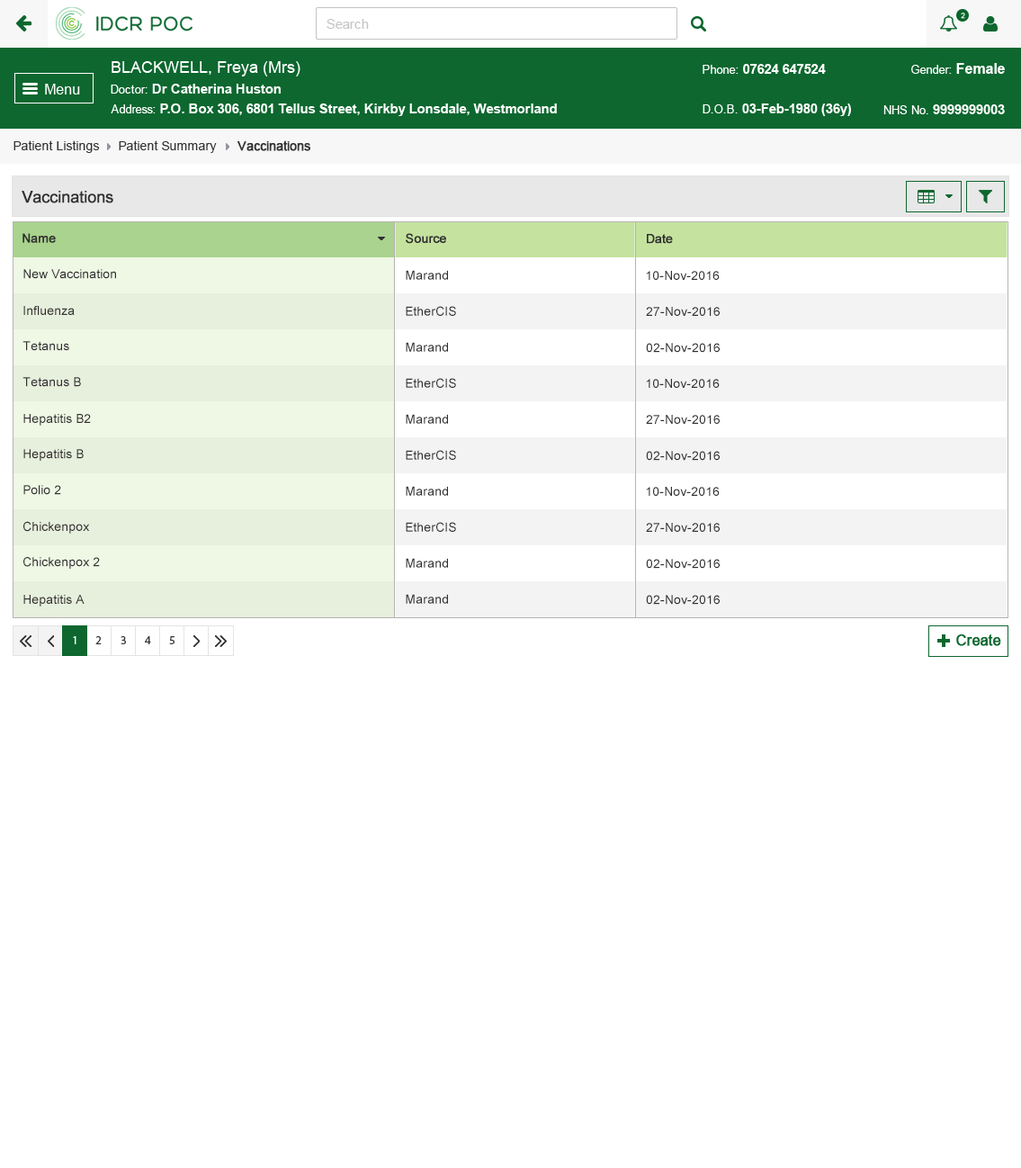
<style>
.page{position:relative;width:1021px;height:1168px;background:#ffffff}
.page>*{position:absolute;margin:0}
.t1{font:12.6px "ArialMT";color:#313131}
.t2{font:12.6px "ArialMT";color:#313131;font-weight:bold}
.t3{font:16.2px "ArialMT";color:#303030;font-weight:bold}
.t4{font:12.6px "ArialMT";color:#303030;font-weight:bold}
.t5{font:12.6px "ArialMT";color:#303030}
</style>
<div class="page">
<p class="t1" style="left:13px;top:140px;width:87px;height:13px">Patient Listings</p>
<p class="t1" style="left:119px;top:140px;width:98px;height:13px">Patient Summary</p>
<p class="t2" style="left:238px;top:140px;width:72px;height:11px">Vaccinations</p>
<p class="t3" style="left:22px;top:191px;width:91px;height:12px">Vaccinations</p>
<p class="t4" style="left:22px;top:233px;width:34px;height:10px">Name</p>
<p class="t4" style="left:406px;top:233px;width:40px;height:11px">Source</p>
<p class="t4" style="left:647px;top:234px;width:26px;height:10px">Date</p>
<p class="t5" style="left:23px;top:269px;width:93px;height:10px">New Vaccination</p>
<p class="t5" style="left:406px;top:270px;width:42px;height:10px">Marand</p>
<p class="t5" style="left:646px;top:271px;width:74px;height:9px">10-Nov-2016</p>
<p class="t5" style="left:23px;top:306px;width:52px;height:9px">Influenza</p>
<p class="t5" style="left:406px;top:306px;width:50px;height:10px">EtherCIS</p>
<p class="t5" style="left:646px;top:307px;width:74px;height:9px">27-Nov-2016</p>
<p class="t5" style="left:22px;top:341px;width:47px;height:10px">Tetanus</p>
<p class="t5" style="left:406px;top:342px;width:42px;height:10px">Marand</p>
<p class="t5" style="left:646px;top:343px;width:74px;height:10px">02-Nov-2016</p>
<p class="t5" style="left:22px;top:377px;width:59px;height:10px">Tetanus B</p>
<p class="t5" style="left:406px;top:378px;width:50px;height:10px">EtherCIS</p>
<p class="t5" style="left:646px;top:379px;width:74px;height:9px">10-Nov-2016</p>
<p class="t5" style="left:23px;top:414px;width:68px;height:12px">Hepatitis B2</p>
<p class="t5" style="left:406px;top:414px;width:42px;height:10px">Marand</p>
<p class="t5" style="left:646px;top:415px;width:74px;height:9px">27-Nov-2016</p>
<p class="t5" style="left:23px;top:449px;width:61px;height:12px">Hepatitis B</p>
<p class="t5" style="left:406px;top:450px;width:50px;height:10px">EtherCIS</p>
<p class="t5" style="left:646px;top:451px;width:74px;height:10px">02-Nov-2016</p>
<p class="t5" style="left:23px;top:485px;width:38px;height:10px">Polio 2</p>
<p class="t5" style="left:406px;top:486px;width:42px;height:10px">Marand</p>
<p class="t5" style="left:646px;top:487px;width:74px;height:9px">10-Nov-2016</p>
<p class="t5" style="left:23px;top:521px;width:67px;height:13px">Chickenpox</p>
<p class="t5" style="left:406px;top:522px;width:50px;height:10px">EtherCIS</p>
<p class="t5" style="left:646px;top:523px;width:74px;height:9px">27-Nov-2016</p>
<p class="t5" style="left:23px;top:557px;width:77px;height:12px">Chickenpox 2</p>
<p class="t5" style="left:406px;top:558px;width:42px;height:10px">Marand</p>
<p class="t5" style="left:646px;top:559px;width:74px;height:10px">02-Nov-2016</p>
<p class="t5" style="left:406px;top:594px;width:42px;height:10px">Marand</p>
<p class="t5" style="left:23px;top:595px;width:62px;height:11px">Hepatitis A</p>
<p class="t5" style="left:646px;top:595px;width:74px;height:10px">02-Nov-2016</p>
</div>
